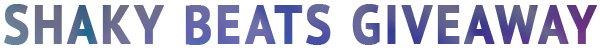
<style>
.page{position:relative;width:600px;height:50px;background:#ffffff}
.page>*{position:absolute;margin:0}
.t1{font:53.8px "PTSans-Bold";letter-spacing:0.06em;text-transform:uppercase;font-weight:bold;scale:0.89 1}
</style>
<div class="page">
<p class="t1" style="left:4px;top:4px;width:593px;height:41px">SHAKY BEATS GIVEAWAY</p>
</div>
